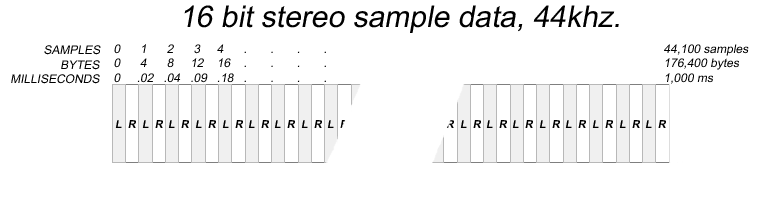
<style>
.page{position:relative;width:772px;height:199px;background:#ffffff}
.page>*{position:absolute;margin:0}
.t1{font:30px "ArialMT";color:#000000;font-style:italic}
.t2{font:12px "ArialMT";color:#000000;font-style:italic}
</style>
<div class="page">
<p class="t1" style="left:184px;top:5px;width:435px;height:28px">16 bit stereo sample data, 44khz.</p>
<p class="t2" style="left:11px;top:45px;width:90px;height:39px">SAMPLES<br>               BYTES<br>MILLISECONDS</p>
<p class="t2" style="left:114px;top:44px;width:635px;height:40px">0      1      2      3     4      .       .       .       .                                                                                                     44,100 samples<br>0      4      8     12    16    .       .       .       .                                                                                                     176,400 bytes<br>0     .02   .04   .09   .18   .       .       .       .                                                                                                     1,000 ms</p>
</div>
